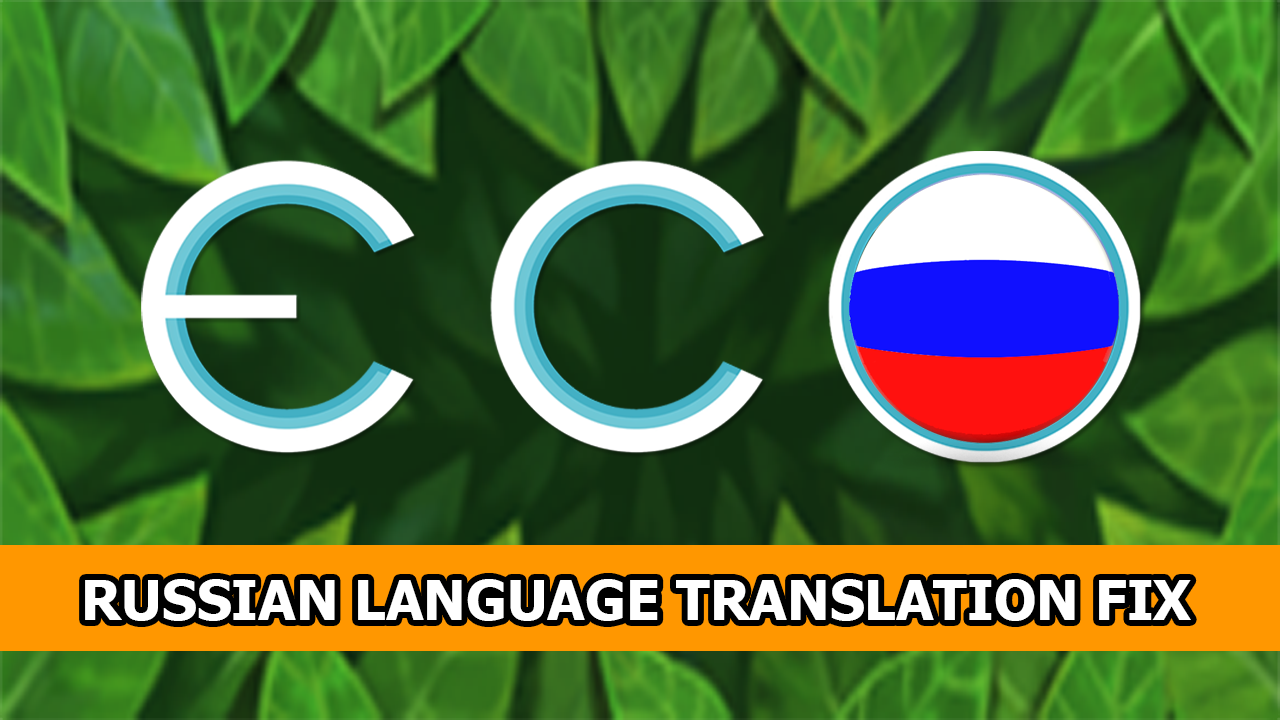
<style>
.page{position:relative;width:1280px;height:720px}
.page>*{position:absolute;margin:0}
.t1{font:55px "Tahoma-Bold";color:#ffffff}
</style>
<div class="page">
<p class="t1" style="left:85px;top:579px;width:1106px;height:42px">RUSSIAN LANGUAGE TRANSLATION FIX</p>
</div>
